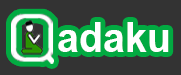
<style>
.page{position:relative;width:181px;height:75px;background:#333333}
.page>*{position:absolute;margin:0}
.t1{font:47.6px "BrowalliaNew-Bold";color:#ffffff;scale:0.95 1}
</style>
<div class="page">
<p class="t1" style="left:58px;top:22px;width:111px;height:30px">adaku</p>
</div>
